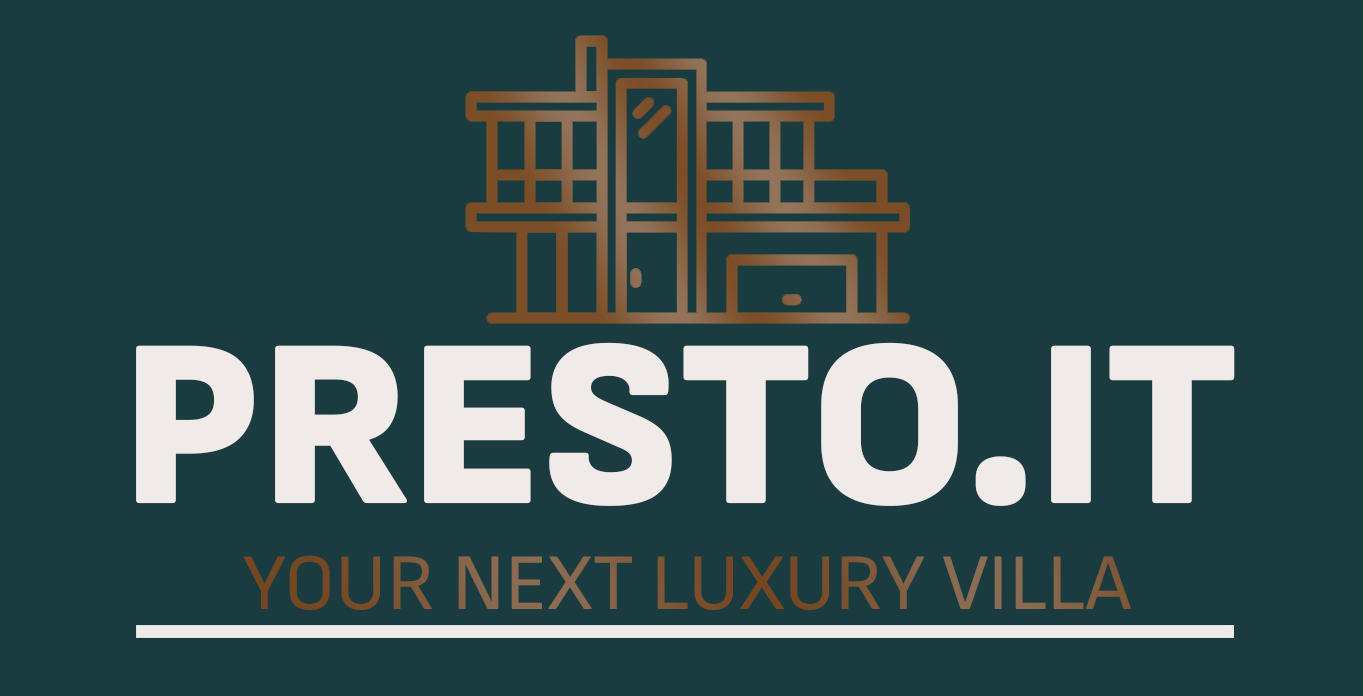
<style>
.page{position:relative;width:1363px;height:696px;background:#1a3c40}
.page>*{position:absolute;margin:0}
.t1{font:240px "SofiaSans-Black";color:#f0ebe8}
.t2{font:80px "SofiaSans-Regular"}
</style>
<div class="page">
<p class="t1" style="left:136px;top:342px;width:1099px;height:164px">PRESTO.IT</p>
<p class="t2" style="left:243px;top:555px;width:888px;height:55px">YOUR NEXT LUXURY VILLA</p>
</div>
